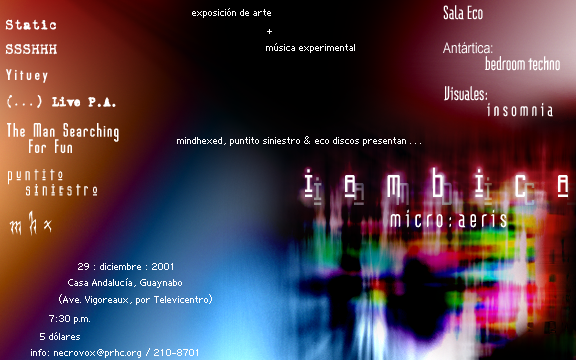
<style>
.page{position:relative;width:576px;height:360px}
.page>*{position:absolute;margin:0}
.t1{font:18.8px "Gothikka";color:#ffffff}
.t2{font:8px "ADMUI3Sm";color:#ffffff}
.t3{font:14.6px "VTCorona";color:#ffffff}
.t4{font:14.6px "ArialNarrow";color:#ffffff}
.t5{font:14.6px "FuturaBT-MediumCondensed";color:#ffffff}
.t6{font:12.6px "Royal-Pain";color:#ffffff}
.t7{font:12.6px "OldTypewriterMessy";color:#ffffff}
.t8{font:16.9px "GothamNightsNormal";color:#ffffff}
.t9{font:16.9px "Kashmir";color:#ffffff}
.t10{font:41.7px "Kashmir";color:#ffffff}
.t11{font:25px "Gothikka";color:#ffffff}
.t12{font:25.3px "Creepygirl";color:#ffffff}
</style>
<div class="page">
<p class="t1" style="left:443px;top:5px;width:40px;height:15px">Sala Eco</p>
<p class="t2" style="left:192px;top:8px;width:79px;height:10px">exposición de arte</p>
<p class="t3" style="left:5px;top:19px;width:51px;height:11px">Static</p>
<p class="t2" style="left:267px;top:29px;width:5px;height:5px">+</p>
<p class="t3" style="left:5px;top:44px;width:52px;height:11px">SSSHHH</p>
<p class="t2" style="left:266px;top:43px;width:89px;height:10px">música experimental</p>
<p class="t4" style="left:443px;top:42px;width:50px;height:12px">Antártica:</p>
<p class="t1" style="left:485px;top:56px;width:75px;height:15px">bedroom techno</p>
<p class="t5" style="left:6px;top:69px;width:42px;height:14px">Y i t u e y</p>
<p class="t1" style="left:444px;top:86px;width:43px;height:15px">Visuales:</p>
<p class="t6" style="left:7px;top:95px;width:35px;height:13px">(...)</p>
<p class="t7" style="left:52px;top:96px;width:64px;height:11px">Live P.A.</p>
<p class="t1" style="left:487px;top:102px;width:66px;height:15px">i n s o m n i a</p>
<p class="t8" style="left:7px;top:123px;width:112px;height:19px">The Man Searching</p>
<p class="t2" style="left:177px;top:136px;width:244px;height:10px">mindhexed, puntito siniestro &amp; eco discos presentan . . .</p>
<p class="t8" style="left:29px;top:139px;width:43px;height:14px">For Fun</p>
<p class="t9" style="left:8px;top:169px;width:55px;height:16px">p u n t i t o</p>
<p class="t10" style="left:305px;top:167px;width:263px;height:30px">i   a   m   b   i   c   a</p>
<p class="t9" style="left:26px;top:184px;width:71px;height:12px">s i n i e s t r o</p>
<p class="t11" style="left:390px;top:209px;width:117px;height:19px">m i c r o : a e r i s</p>
<p class="t12" style="left:9px;top:210px;width:43px;height:26px">m h x</p>
<p class="t2" style="left:78px;top:263px;width:95px;height:7px">29 : diciembre : 2001</p>
<p class="t2" style="left:68px;top:278px;width:114px;height:10px">Casa Andalucía, Guaynabo</p>
<p class="t2" style="left:59px;top:294px;width:153px;height:11px">(Ave. Vigoreaux, por Televicentro)</p>
<p class="t2" style="left:49px;top:315px;width:41px;height:9px">7:30 p.m.</p>
<p class="t2" style="left:40px;top:332px;width:40px;height:8px">5 dólares</p>
<p class="t2" style="left:31px;top:348px;width:167px;height:10px">info: necrovox@prhc.org / 210-8701</p>
</div>
